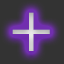
<style>
.page{position:relative;width:64px;height:64px;background:#333333}
.page>*{position:absolute;margin:0}
.t1{font:72px "MyriadPro-Regular";color:#cfcfcf}
</style>
<div class="page">
<p class="t1" style="left:12px;top:12px;width:38px;height:39px">+</p>
</div>
